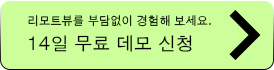
<style>
.page{position:relative;width:274px;height:70px;background:#ccff99}
.page>*{position:absolute;margin:0}
.t1{font:12px "AppleGothic";color:#000000;scale:0.94 1}
.t2{font:14.9px "AppleGothic";color:#000000;scale:0.94 1}
.t3{font:18px "AppleGothic";color:#000000}
</style>
<div class="page">
<p class="t1" style="left:28px;top:15px;width:183px;height:12px">리모트뷰를 부담없이 경험해 보세요<span class="t2">.</span></p>
<p class="t3" style="left:29px;top:35px;width:163px;height:17px">14일 무료 데모 신청</p>
</div>
